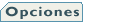
<style>
.page{position:relative;width:120px;height:22px;background:#f0f0e8}
.page>*{position:absolute;margin:0}
.t1{font:13.3px "GillSansMT-Bold";letter-spacing:0.06em;color:#35535e;scale:1.17 1}
</style>
<div class="page">
<p class="t1" style="left:5px;top:6px;width:74px;height:13px">Opciones</p>
</div>
